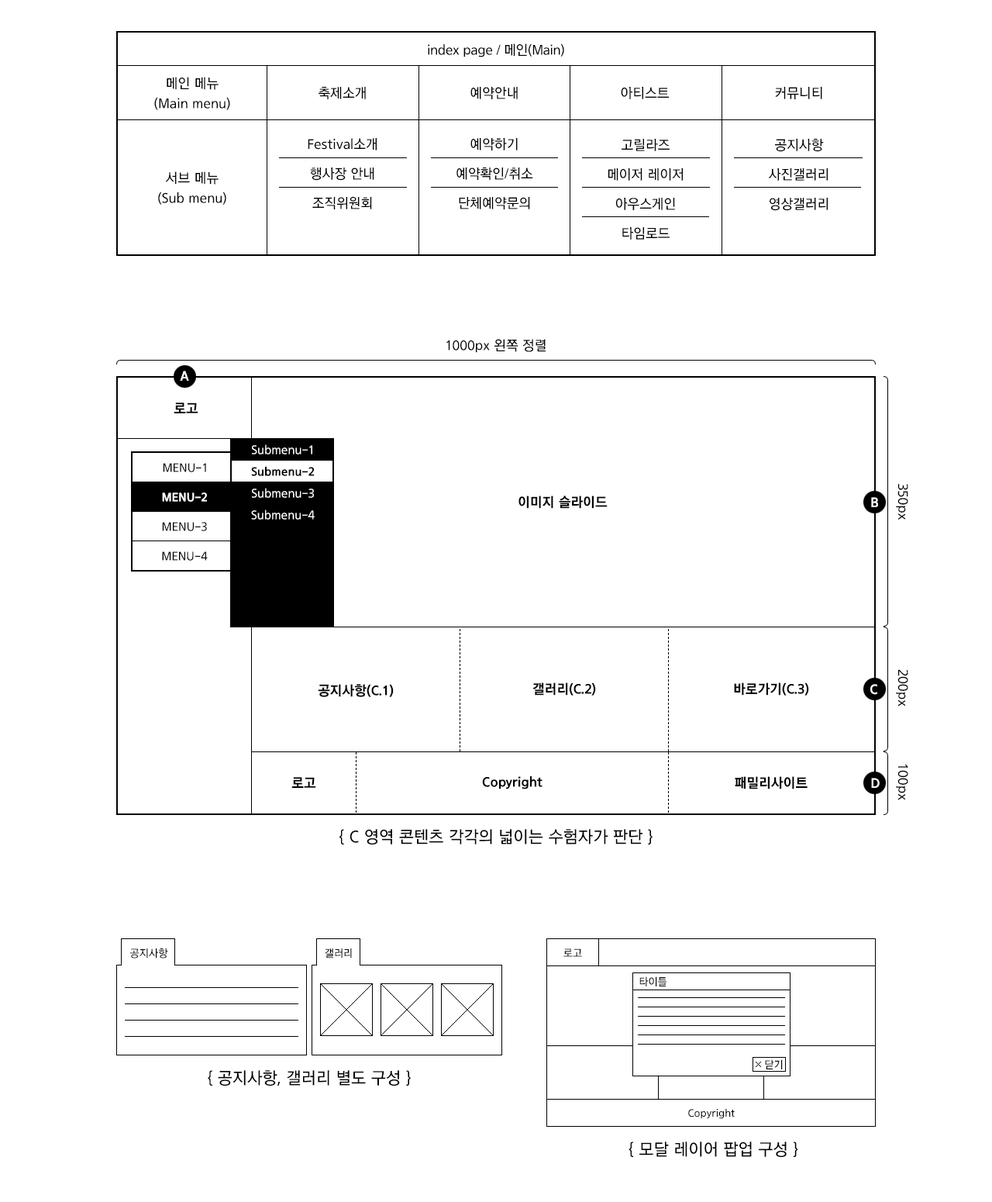
<style>
.page{position:relative;width:992px;height:1202px;background:#ffffff}
.page>*{position:absolute;margin:0}
.t1{font:14px "THELuxGoM";letter-spacing:-0.025em;color:#000000;scale:0.95 1}
.t2{font:14px/20.2px "THELuxGoM";color:#000000;scale:0.95 1}
.t3{font:14px "THELuxGoM";color:#000000;scale:0.95 1}
.t4{font:14px/29.5px "THELuxGoM";color:#000000;scale:0.95 1}
.t5{font:14px "THELuxGoEB";color:#ffffff;scale:0.95 1}
.t6{font:14px "THELuxGoEB";color:#000000;scale:0.95 1}
.t7{font:12.4px "THELuxGoM";color:#000000;scale:0.95 1}
.t8{font:13.9px "THELuxGoM";color:#000000;scale:0.96 1}
.t9{font:12.4px "THELuxGoEB";color:#ffffff;scale:0.95 1}
.t10{font:17.1px "THELuxGoM";color:#000000;scale:0.95 1}
.t11{font:10.9px "THELuxGoM";color:#000000;scale:0.95 1}
</style>
<div class="page">
<p class="t1" style="left:428px;top:43px;width:136px;height:14px">index page / 메인(Main)</p>
<p class="t2" style="left:154px;top:77px;width:76px;height:33px;text-align:center">메인 메뉴<br>(Main menu)</p>
<p class="t3" style="left:319px;top:87px;width:47px;height:12px">축제소개</p>
<p class="t3" style="left:471px;top:87px;width:47px;height:12px">예약안내</p>
<p class="t3" style="left:621px;top:87px;width:48px;height:12px">아티스트</p>
<p class="t3" style="left:775px;top:87px;width:48px;height:12px">커뮤니티</p>
<p class="t4" style="left:308px;top:138px;width:69px;height:71px;text-align:center">Festival소개<br>행사장 안내<br>조직위원회</p>
<p class="t4" style="left:457px;top:138px;width:76px;height:71px;text-align:center">예약하기<br>예약확인/취소<br>단체예약문의</p>
<p class="t4" style="left:608px;top:139px;width:75px;height:101px;text-align:center">고릴라즈<br>메이저 레이저<br>아우스게인<br>타임로드</p>
<p class="t4" style="left:768px;top:139px;width:61px;height:72px;text-align:center">공지사항<br>사진갤러리<br>영상갤러리</p>
<p class="t2" style="left:158px;top:171px;width:68px;height:34px;text-align:center">서브 메뉴<br>(Sub menu)</p>
<p class="t3" style="left:447px;top:339px;width:99px;height:14px">1000px 왼쪽 정렬</p>
<p class="t5" style="left:180px;top:371px;width:9px;height:10px">A</p>
<p class="t6" style="left:174px;top:402px;width:24px;height:11px">로고</p>
<p class="t7" style="left:163px;top:463px;width:43px;height:9px">MENU-1</p>
<p class="t8" style="left:896px;top:484px;width:13px;height:36px;rotate:90deg">350px</p>
<p class="t9" style="left:162px;top:492px;width:45px;height:10px">MENU-2</p>
<p class="t6" style="left:519px;top:495px;width:89px;height:14px">이미지 슬라이드</p>
<p class="t5" style="left:871px;top:497px;width:7px;height:10px">B</p>
<p class="t7" style="left:162px;top:522px;width:45px;height:9px">MENU-3</p>
<p class="t7" style="left:162px;top:551px;width:46px;height:10px">MENU-4</p>
<p class="t8" style="left:896px;top:669px;width:13px;height:37px;rotate:90deg">200px</p>
<p class="t6" style="left:318px;top:684px;width:76px;height:13px">공지사항(C.1)</p>
<p class="t6" style="left:533px;top:682px;width:63px;height:13px">갤러리(C.2)</p>
<p class="t6" style="left:734px;top:682px;width:75px;height:13px">바로가기(C.3)</p>
<p class="t5" style="left:871px;top:684px;width:7px;height:11px">C</p>
<p class="t8" style="left:896px;top:764px;width:13px;height:36px;rotate:90deg">100px</p>
<p class="t6" style="left:291px;top:777px;width:25px;height:11px">로고</p>
<p class="t6" style="left:482px;top:776px;width:61px;height:13px">Copyright</p>
<p class="t6" style="left:735px;top:776px;width:73px;height:13px">패밀리사이트</p>
<p class="t5" style="left:871px;top:778px;width:9px;height:10px">D</p>
<p class="t10" style="left:340px;top:829px;width:313px;height:15px">{ C 영역 콘텐츠 각각의 넓이는 수험자가 판단 }</p>
<p class="t11" style="left:130px;top:948px;width:38px;height:10px">공지사항</p>
<p class="t11" style="left:325px;top:948px;width:27px;height:10px">갤러리</p>
<p class="t11" style="left:564px;top:948px;width:18px;height:9px">로고</p>
<p class="t11" style="left:640px;top:976px;width:27px;height:10px">타이틀</p>
<p class="t11" style="left:765px;top:1059px;width:18px;height:10px">닫기</p>
<p class="t10" style="left:208px;top:1070px;width:203px;height:16px">{ 공지사항, 갤러리 별도 구성 }</p>
<p class="t11" style="left:688px;top:1108px;width:47px;height:11px">Copyright</p>
<p class="t10" style="left:629px;top:1141px;width:170px;height:16px">{ 모달 레이어 팝업 구성 }</p>
</div>
